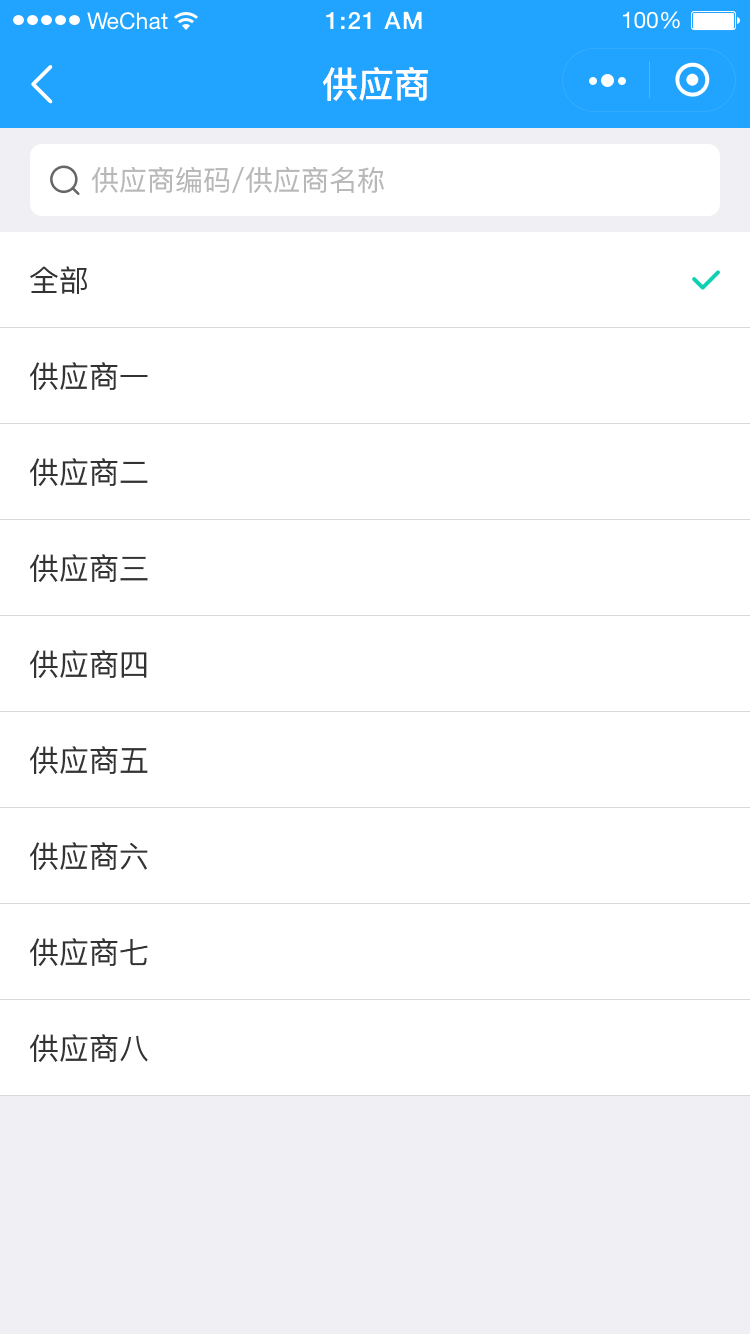
<style>
.page{position:relative;width:750px;height:1334px;background:#ffffff}
.page>*{position:absolute;margin:0}
.t1{font:36px "PingFang-SC-Bold";color:#ffffff}
.t2{font:28px "PingFang-SC-Medium";color:#b8b8b8}
.t3{font:30px "PingFang-SC-Medium";color:#333333}
</style>
<div class="page">
<p class="t1" style="left:323px;top:67px;width:105px;height:34px">供应商</p>
<p class="t2" style="left:91px;top:167px;width:293px;height:26px">供应商编码/供应商名称</p>
<p class="t3" style="left:30px;top:266px;width:57px;height:28px">全部</p>
<p class="t3" style="left:30px;top:362px;width:118px;height:28px">供应商一</p>
<p class="t3" style="left:30px;top:458px;width:118px;height:28px">供应商二</p>
<p class="t3" style="left:30px;top:554px;width:118px;height:28px">供应商三</p>
<p class="t3" style="left:30px;top:650px;width:117px;height:28px">供应商四</p>
<p class="t3" style="left:30px;top:746px;width:118px;height:28px">供应商五</p>
<p class="t3" style="left:30px;top:842px;width:118px;height:28px">供应商六</p>
<p class="t3" style="left:30px;top:938px;width:118px;height:28px">供应商七</p>
<p class="t3" style="left:30px;top:1034px;width:118px;height:28px">供应商八</p>
</div>
